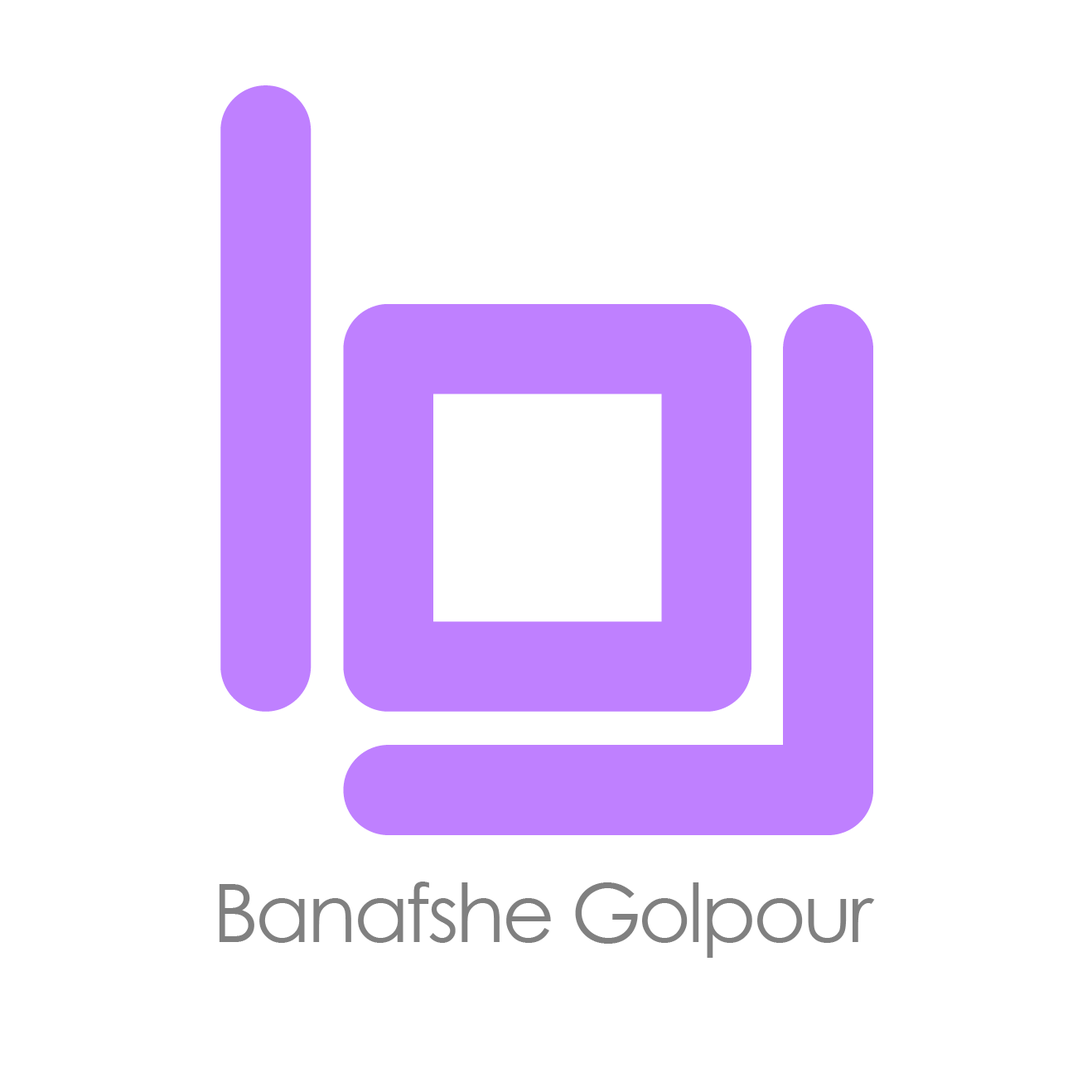
<style>
.page{position:relative;width:1092px;height:1092px;background:#ffffff}
.page>*{position:absolute;margin:0}
.t1{font:81px "CenturyGothic";letter-spacing:-0.04em;color:#808080}
</style>
<div class="page">
<p class="t1" style="left:219px;top:882px;width:656px;height:76px">Banafshe Golpour</p>
</div>
